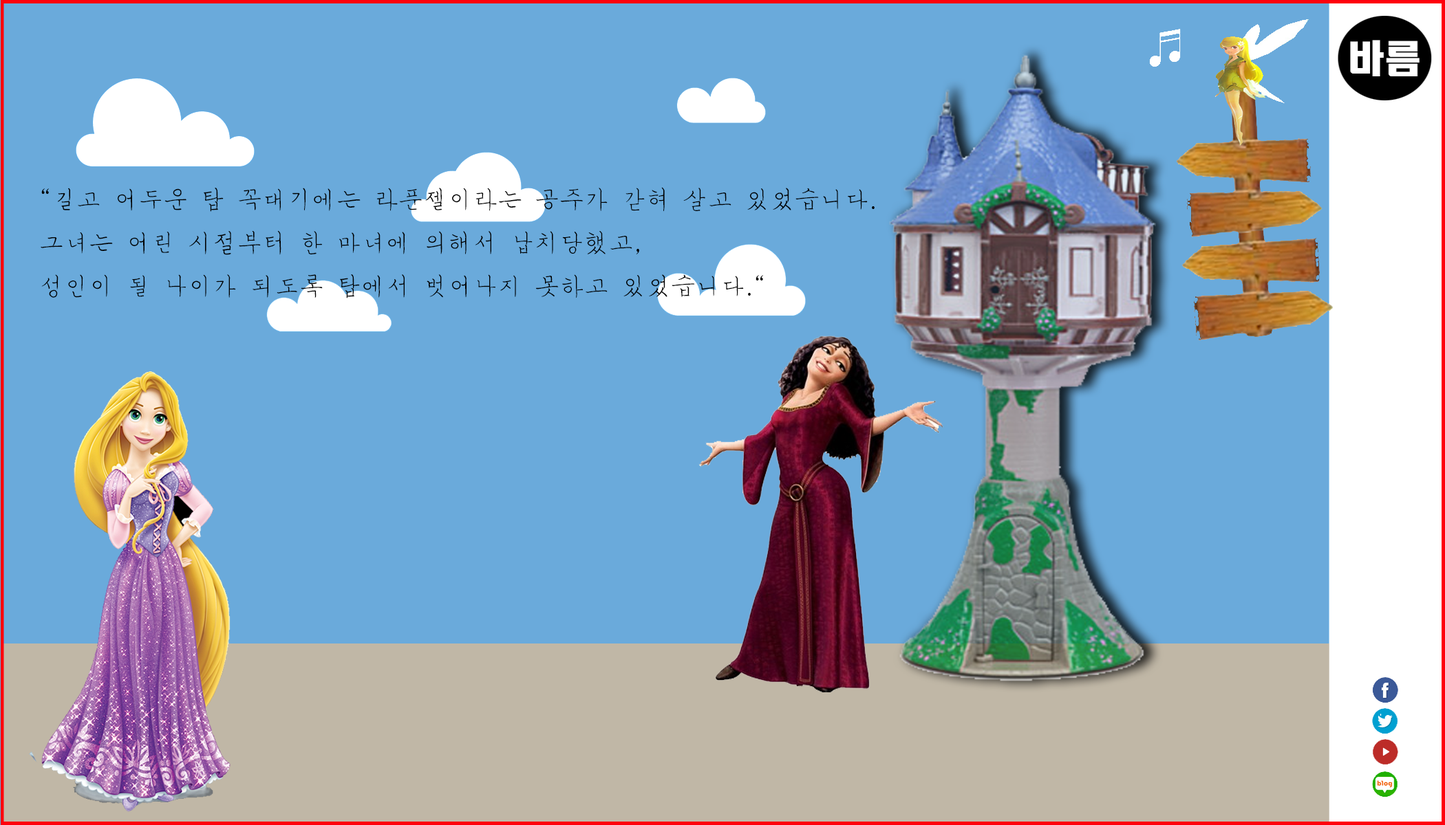
<style>
.page{position:relative;width:1445px;height:825px;background:#6aaadb}
.page>*{position:absolute;margin:0}
.t1{font:24.8px "MSugiJeong";color:#000000}
.t2{font:24.8px "Gulim";color:#000000}
</style>
<div class="page">
<p class="t1" style="left:41px;top:187px;width:833px;height:112px"><span class="t2">“</span>길고 어두운 탑 꼭대기에는 라푼젤이라는 공주가 갇혀 살고 있었습니다<span class="t2">.</span> <br>그녀는 어린 시절부터 한 마녀에 의해서 납치당했고<span class="t2">,</span> <br>성인이 될 나이가 되도록 탑에서 벗어나지 못하고 있었습니다<span class="t2">.“</span></p>
</div>
